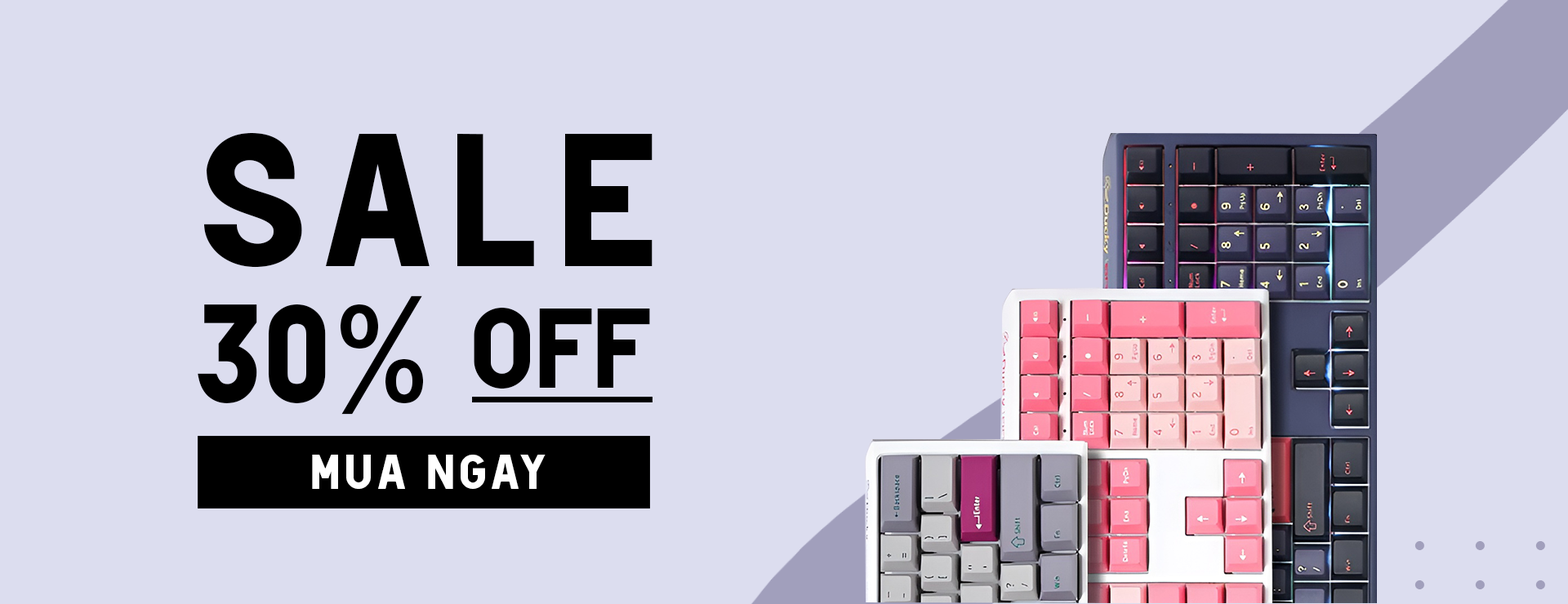
<style>
.page{position:relative;width:1568px;height:604px;background:#dcddef}
.page>*{position:absolute;margin:0}
.t1{font:188.5px "HotelDeParisXe";letter-spacing:0.1em;color:#000000}
.t2{font:141.4px "HotelDeParisXe";color:#000000}
.t3{font:113.1px "HotelDeParisXe";color:#000000}
.t4{font:49px "HotelDeParisXe";letter-spacing:0.1em;color:#ffffff}
</style>
<div class="page">
<p class="t1" style="left:204px;top:133px;width:449px;height:135px">sale</p>
<p class="t2" style="left:198px;top:296px;width:225px;height:119px">30%</p>
<p class="t3" style="left:474px;top:307px;width:176px;height:83px">OfF</p>
<p class="t4" style="left:312px;top:455px;width:234px;height:34px">MUA NGAY</p>
</div>
